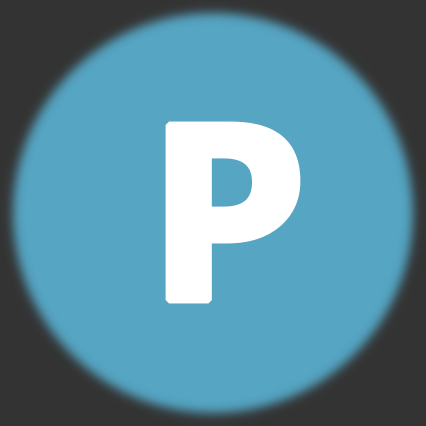
<style>
.page{position:relative;width:426px;height:426px;background:#55a5c3}
.page>*{position:absolute;margin:0}
.t1{font:250px "MyanmarText-Bold";color:#ffffff;font-weight:bold}
</style>
<div class="page">
<p class="t1" style="left:165px;top:121px;width:136px;height:183px">P</p>
</div>
